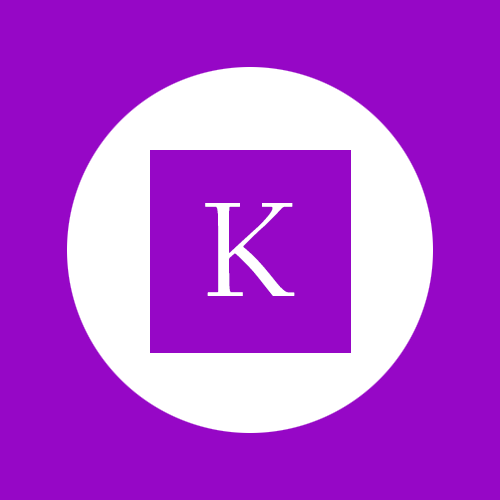
<style>
.page{position:relative;width:500px;height:500px;background:#9607c6}
.page>*{position:absolute;margin:0}
.t1{font:140px "CalifornianFB-Reg";color:#ffffff}
</style>
<div class="page">
<p class="t1" style="left:205px;top:203px;width:90px;height:93px">K</p>
</div>
